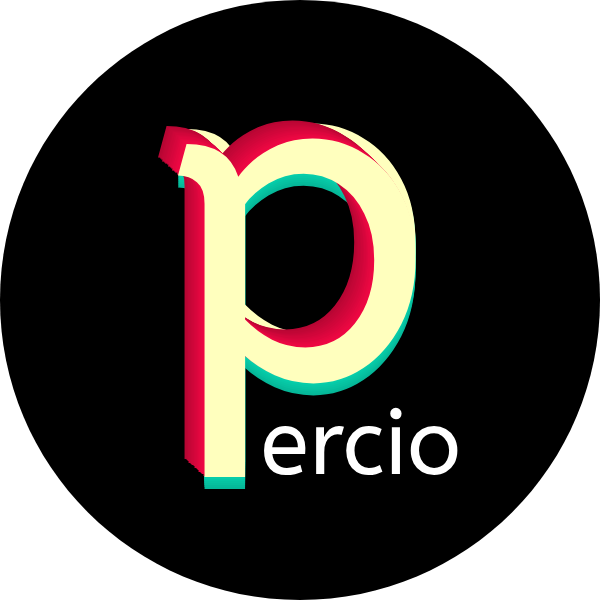
<style>
.page{position:relative;width:600px;height:600px;background:#000000}
.page>*{position:absolute;margin:0}
.t1{font:450px "ABeeZee-Regular";color:#ffffbe}
.t2{font:90px "ABeeZee-Regular";color:#ffffff}
</style>
<div class="page">
<p class="t1" style="left:178px;top:123px;width:238px;height:339px">p</p>
<p class="t1" style="left:178px;top:138px;width:238px;height:339px">p</p>
<p class="t2" style="left:264px;top:407px;width:194px;height:69px">ercio</p>
</div>
